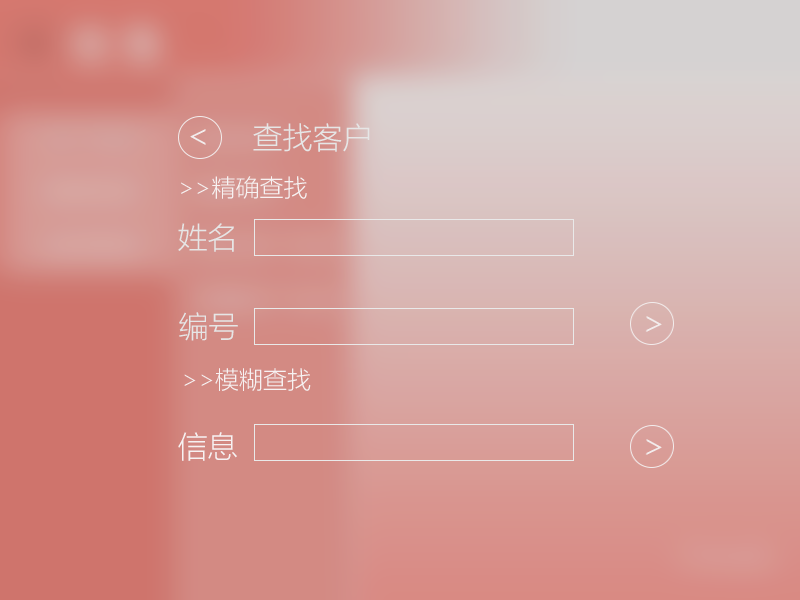
<style>
.page{position:relative;width:800px;height:600px}
.page>*{position:absolute;margin:0}
.t1{font:30px "MicrosoftYaHeiLight";color:#e6e6e6}
.t2{font:24px "MicrosoftYaHeiLight";color:#f7f2f2}
.t3{font:30px "MicrosoftYaHeiLight";color:#f7f2f2}
</style>
<div class="page">
<p class="t1" style="left:253px;top:123px;width:117px;height:29px">查找客户</p>
<p class="t2" style="left:181px;top:176px;width:126px;height:23px">&gt;&gt;精确查找</p>
<p class="t1" style="left:178px;top:223px;width:56px;height:29px">姓名</p>
<p class="t1" style="left:179px;top:312px;width:59px;height:29px">编号</p>
<p class="t2" style="left:184px;top:368px;width:127px;height:23px">&gt;&gt;模糊查找</p>
<p class="t3" style="left:178px;top:432px;width:59px;height:29px">信息</p>
</div>
